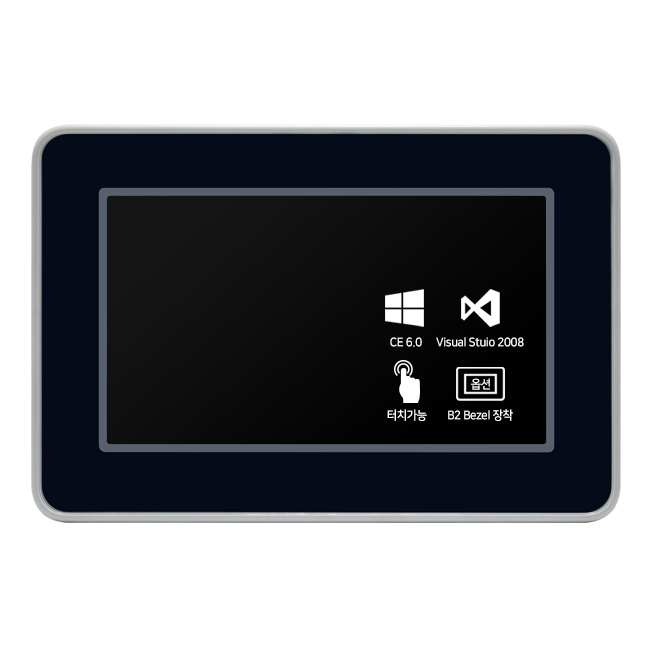
<style>
.page{position:relative;width:650px;height:650px;background:#ffffff}
.page>*{position:absolute;margin:0}
.t1{font:12px "NanumSquareB";letter-spacing:-0.03em;color:#ffffff;scale:0.95 1}
</style>
<div class="page">
<p class="t1" style="left:390px;top:337px;width:32px;height:10px">CE 6.0</p>
<p class="t1" style="left:436px;top:337px;width:88px;height:10px">Visual Stuio 2008</p>
<p class="t1" style="left:471px;top:378px;width:19px;height:12px">옵션</p>
<p class="t1" style="left:387px;top:409px;width:40px;height:12px">터치가능</p>
<p class="t1" style="left:448px;top:409px;width:65px;height:12px">B2 Bezel 장착</p>
</div>
